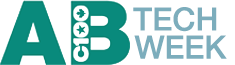
<style>
.page{position:relative;width:235px;height:65px;background:#ffffff}
.page>*{position:absolute;margin:0}
.t1{font:32px/28px "HelveticaNeue-Medium";color:#7bacbb}
</style>
<div class="page">
<p class="t1" style="left:133px;top:7px;width:94px;height:52px;text-align:center">TECH <br>WEEK</p>
</div>
